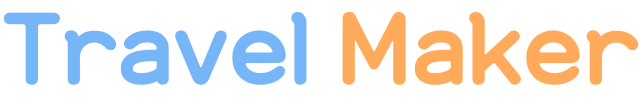
<style>
.page{position:relative;width:640px;height:100px;background:#ffffff}
.page>*{position:absolute;margin:0}
.t1{font:125px "YanoljaYacheB";color:#76b7f9}
.t2{font:125px "YanoljaYacheB";color:#ffac5b}
</style>
<div class="page">
<p class="t1" style="left:4px;top:12px;width:635px;height:73px">Travel <span class="t2">Maker</span></p>
</div>
